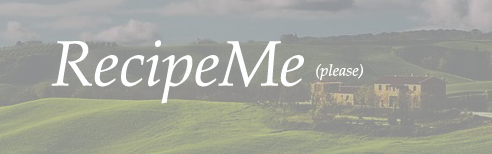
<style>
.page{position:relative;width:492px;height:154px}
.page>*{position:absolute;margin:0}
.t1{font:64px "BookAntiqua-Italic";color:#fefefe}
.t2{font:16px "BookAntiqua-Italic";color:#fefefe}
</style>
<div class="page">
<p class="t1" style="left:51px;top:40px;width:253px;height:64px">RecipeMe</p>
<p class="t2" style="left:316px;top:64px;width:47px;height:17px">(please)</p>
</div>
